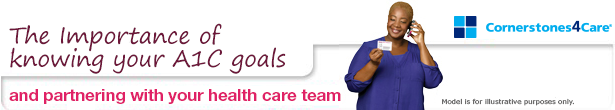
<style>
.page{position:relative;width:615px;height:110px;background:#ffffff}
.page>*{position:absolute;margin:0}
.t1{font:23px/23px "SegoePrint";letter-spacing:-0.015em;color:#6d173a}
.t2{font:15.8px "HelveticaNeueLTStd-Bd";letter-spacing:-0.01em;color:#e02166;scale:1.08 1}
.t3{font:6.5px "Verdana";color:#5d5c5c;scale:1.08 1}
</style>
<div class="page">
<p class="t1" style="left:9px;top:23px;width:277px;height:51px">The Importance of <br>knowing your A1C goals</p>
<p class="t2" style="left:9px;top:89px;width:332px;height:15px">and partnering with your health care team</p>
<p class="t3" style="left:442px;top:98px;width:132px;height:8px">Model is for illustrative purposes only.</p>
</div>
